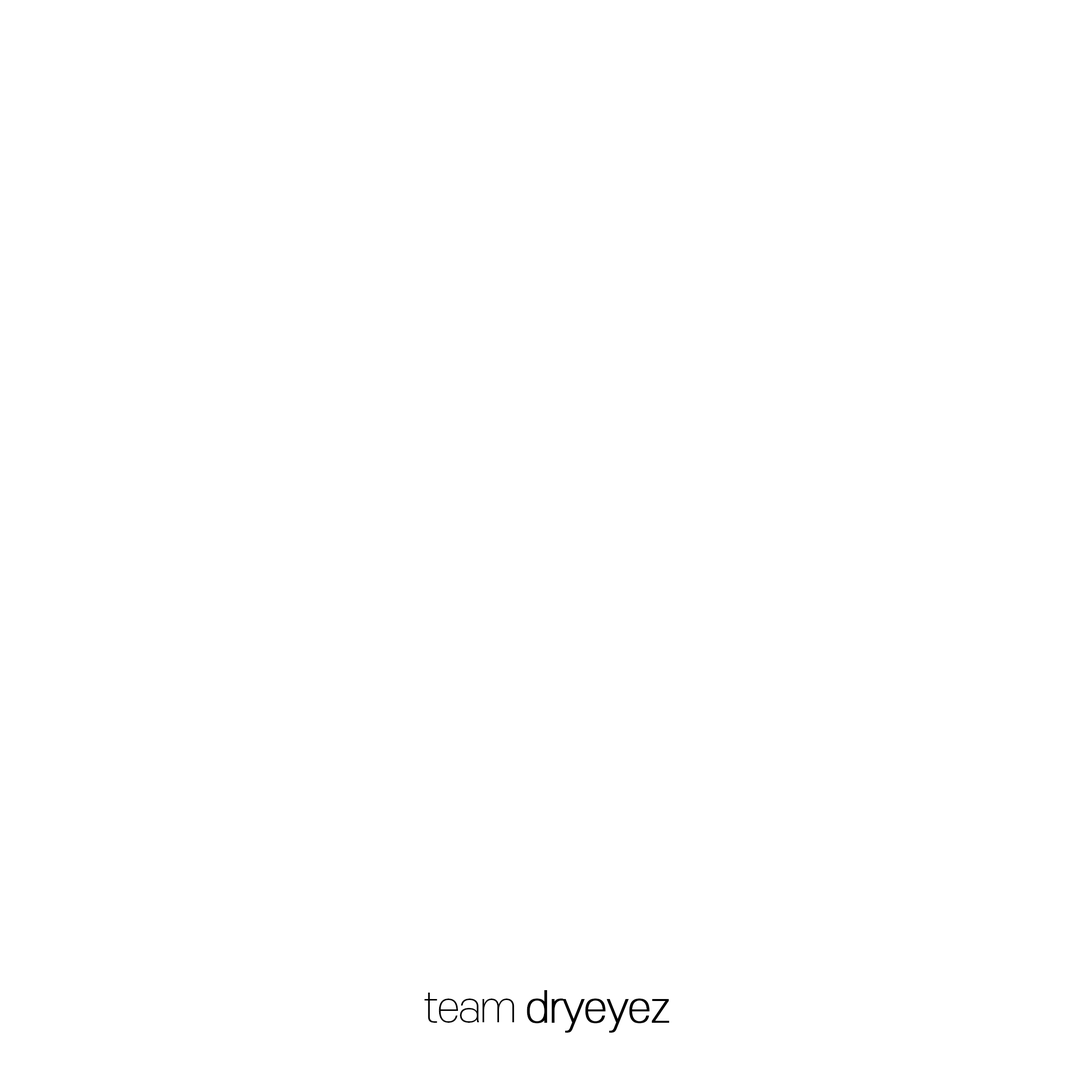
<style>
.page{position:relative;width:1092px;height:1092px;background:#ffffff}
.page>*{position:absolute;margin:0}
.t1{font:41.2px "S-CoreDream-2ExtraLight";letter-spacing:-0.05em;color:#000000;font-weight:bold}
.t2{font:41.2px "S-CoreDream-2ExtraLight";letter-spacing:-0.05em;color:#000000}
</style>
<div class="page">
<p class="t1" style="left:424px;top:990px;width:245px;height:43px"><span class="t2">team </span>dryeyez</p>
</div>
